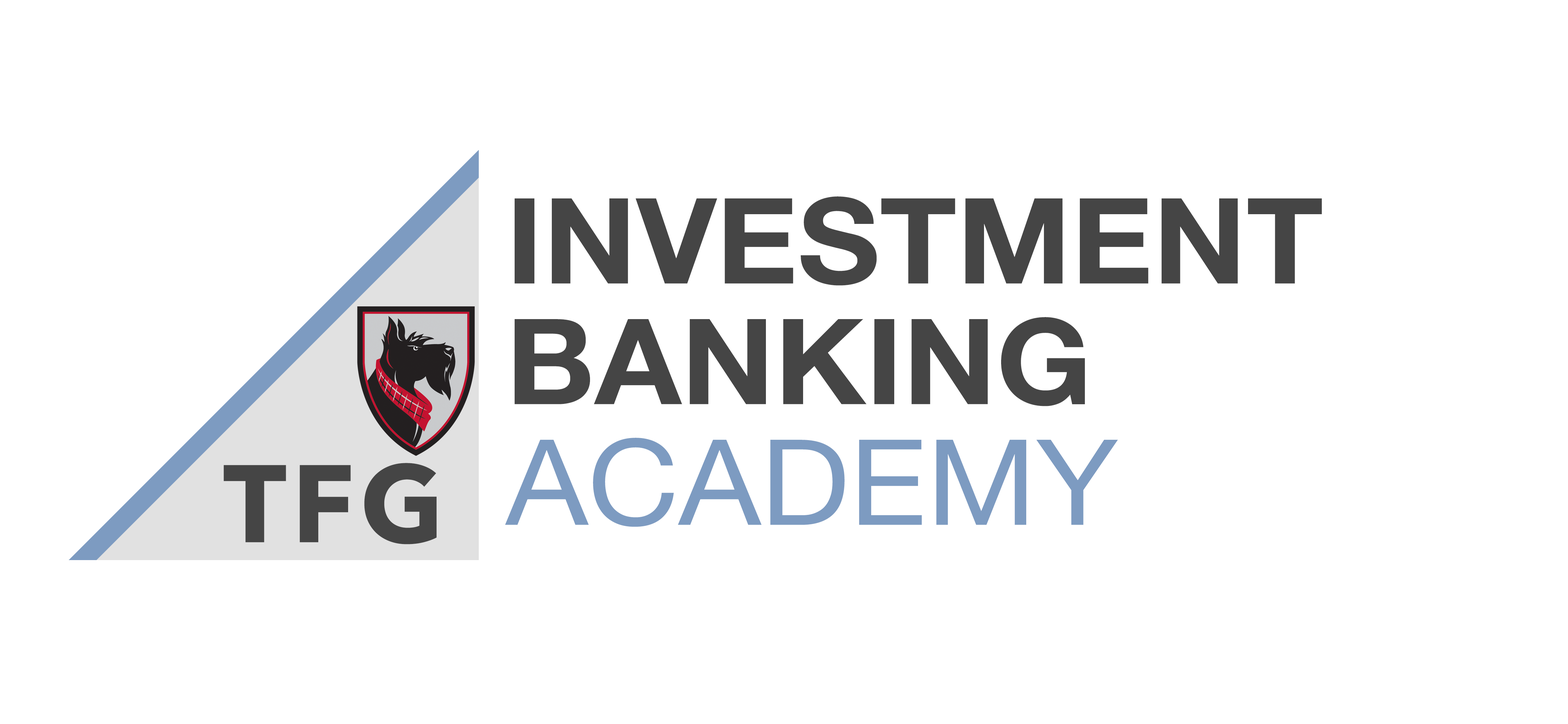
<style>
.page{position:relative;width:1568px;height:724px;background:#ffffff}
.page>*{position:absolute;margin:0}
.t1{font:118.9px/120.6px "HelveticaNeue-Bold";color:#454545;scale:1.06 1}
.t2{font:118.9px/120.6px "HelveticaNeue";color:#7d9bc1;scale:1.06 1}
.t3{font:108.9px "AvenirNext-Bold";letter-spacing:0.05em;color:#454545}
</style>
<div class="page">
<p class="t1" style="left:505px;top:196px;width:817px;height:331px">INVESTMENT<br>BANKING<br><span class="t2">ACADEMY</span></p>
<p class="t3" style="left:223px;top:463px;width:214px;height:81px">TFG</p>
</div>
